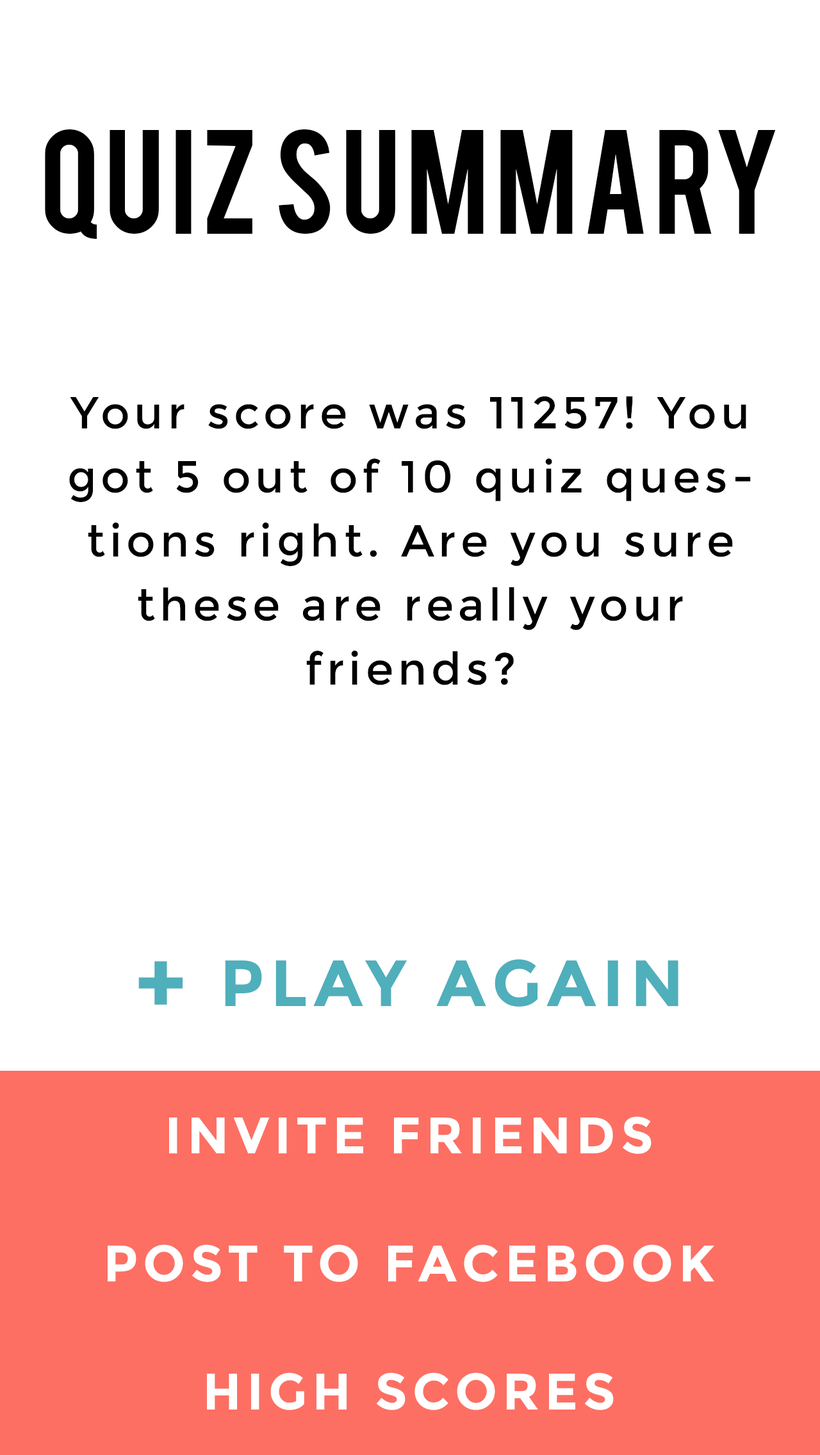
<style>
.page{position:relative;width:820px;height:1455px;background:#ffffff}
.page>*{position:absolute;margin:0}
.t1{font:115.3px "Bebas";letter-spacing:0.025em;color:#000000}
.t2{font:44.8px/64px "Montserrat-Regular";letter-spacing:0.1em;color:#000000}
.t3{font:51.2px/128.1px "Montserrat-Bold";letter-spacing:0.1em;color:#ffffff}
.t4{font:89.6px/83.2px "Montserrat-Bold";letter-spacing:0.1em;color:#4fafbb}
.t5{font:65.3px/83.2px "Montserrat-Bold";letter-spacing:0.1em;color:#4fafbb}
.t6{font:51.2px/147.3px "Montserrat-Bold";letter-spacing:0.1em;color:#ffffff}
.t7{font:89.6px "Montserrat-Bold";letter-spacing:0.1em;color:#4fafbb}
</style>
<div class="page">
<p class="t1" style="left:45px;top:129px;width:730px;height:110px">QUIZ SUMMARY</p>
<p class="t2" style="left:69px;top:396px;width:681px;height:289px;text-align:center">Your score was 11257! You got 5 out of 10 quiz questions right. Are you sure these are really your friends?</p>
<p class="t3" style="left:108px;top:953px;width:606px;height:457px;text-align:center"><span class="t4">+ </span><span class="t5">PLAY AGAIN<br></span><span class="t6">INVITE FRIENDS<br></span>POST TO FACEBOOK<br>HIGH SCORES</p>
<p class="t7" style="left:138px;top:961px;width:45px;height:44px">+</p>
</div>
